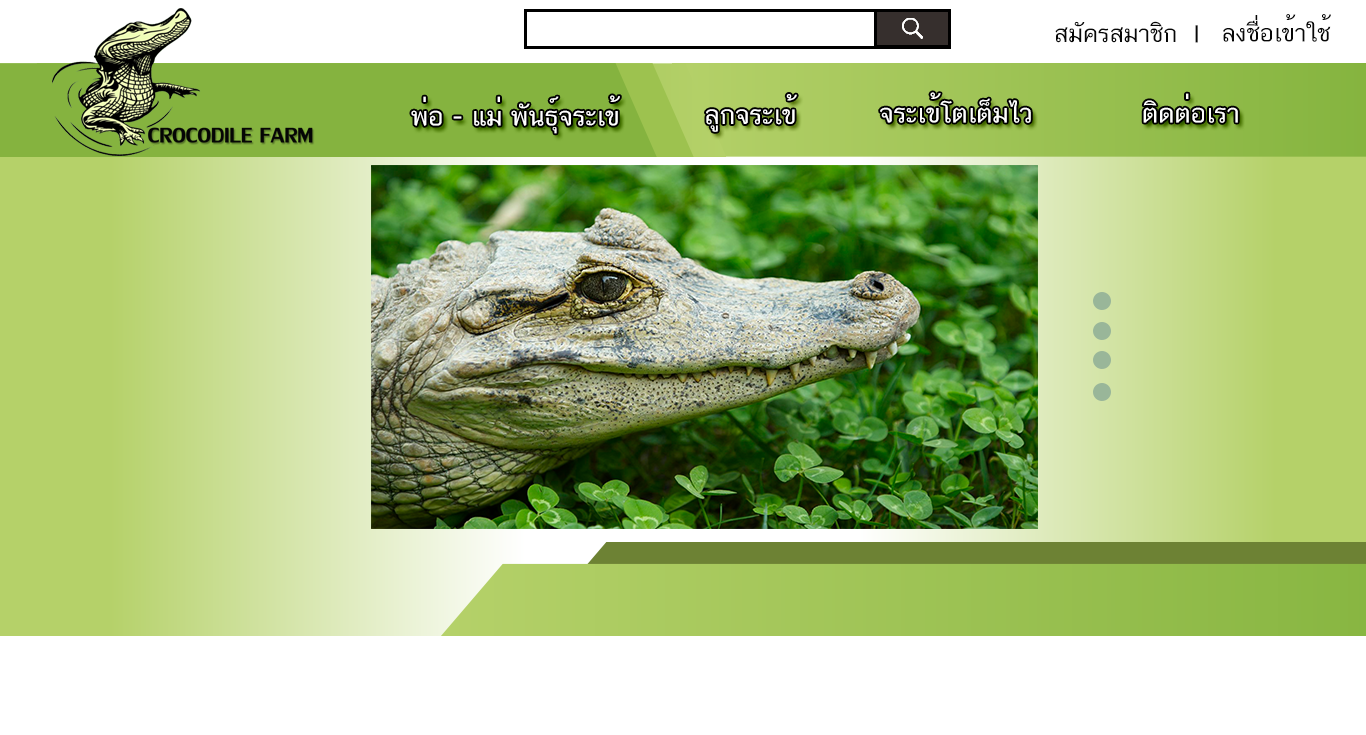
<style>
.page{position:relative;width:1366px;height:735px;background:#ffffff}
.page>*{position:absolute;margin:0}
.t1{font:32.9px "CSChatThai";color:#060606;text-transform:uppercase}
.t2{font:36px "CSChatThai";color:#ffffff;text-transform:uppercase}
</style>
<div class="page">
<p class="t1" style="left:1223px;top:14px;width:108px;height:28px">ลงชื่อเข้าใช้</p>
<p class="t1" style="left:1055px;top:21px;width:121px;height:22px">สมััครสมาชิก</p>
<p class="t1" style="left:1195px;top:25px;width:3px;height:18px">I</p>
<p class="t2" style="left:411px;top:95px;width:209px;height:39px">พ่อ - แม่ พันธุ์จระเข้</p>
<p class="t2" style="left:706px;top:94px;width:91px;height:38px">ลูกจระเข้</p>
<p class="t2" style="left:880px;top:92px;width:151px;height:31px">จระเข้โตเต็มไว</p>
<p class="t2" style="left:1143px;top:93px;width:95px;height:30px">ติดต่อเรา</p>
</div>
